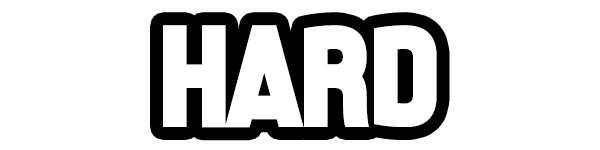
<style>
.page{position:relative;width:600px;height:150px;background:#ffffff}
.page>*{position:absolute;margin:0}
.t1{font:160px "SheSmiles";color:#ffffff}
</style>
<div class="page">
<p class="t1" style="left:163px;top:25px;width:274px;height:103px">hard</p>
</div>
